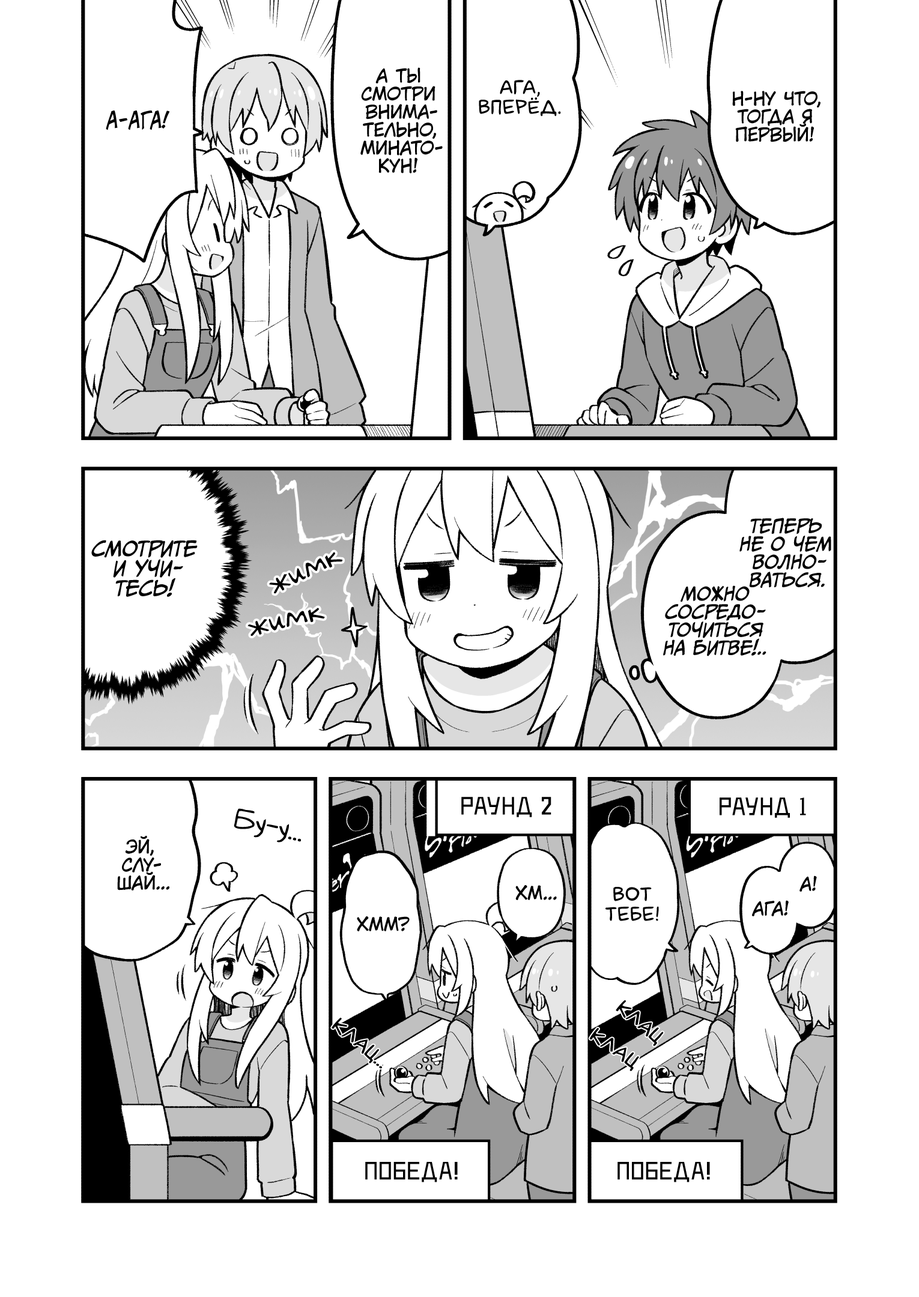
<style>
.page{position:relative;width:919px;height:1297px;background:#ffffff}
.page>*{position:absolute;margin:0}
.t1{font:18px "KuraiVoice2";color:#000000;text-transform:uppercase}
.t2{font:19.8px "laCartoonerie";color:#000000;text-transform:uppercase}
.t3{font:21.6px "v_CCJeffCampbell";color:#000000;text-transform:uppercase}
.t4{font:18px "CCMeanwhile";color:#000000;text-transform:uppercase;font-style:italic}
.t5{font:19.8px "CCMeanwhile";color:#000000;text-transform:uppercase;font-style:italic}
.t6{font:28.8px "v_Augie";color:#000000}
.t7{font:25.2px "DeadMetroC";color:#000000;text-transform:uppercase}
.t8{font:27px "v_Augie";color:#000000}
</style>
<div class="page">
<p class="t1" style="left:360px;top:67px;width:83px;height:107px;text-align:center">А ты<br>смотри<br>внима-<br>тельно,<br>Минато-<br>кун!</p>
<p class="t2" style="left:479px;top:80px;width:82px;height:37px;text-align:center">Ага,<br>вперёд.</p>
<p class="t1" style="left:732px;top:91px;width:89px;height:51px;text-align:center">Н-ну что,<br>тогда я<br>первый!</p>
<p class="t3" style="left:106px;top:111px;width:64px;height:19px">А-ага!</p>
<p class="t4" style="left:739px;top:518px;width:92px;height:70px;text-align:center">Теперь<br>не о чем<br>волно-<br>ваться.</p>
<p class="t5" style="left:91px;top:540px;width:107px;height:57px;text-align:center">Смотрите<br>и учи-<br>тесь!</p>
<p class="t6" style="left:269px;top:552px;width:73px;height:42px;rotate:-27deg">жимк</p>
<p class="t4" style="left:663px;top:586px;width:103px;height:71px;text-align:center">Можно<br>сосредо-<br>точиться<br>на битве!..</p>
<p class="t6" style="left:247px;top:608px;width:78px;height:28px;rotate:-15deg">жимк</p>
<p class="t7" style="left:461px;top:797px;width:90px;height:21px">Раунд 2</p>
<p class="t7" style="left:720px;top:798px;width:86px;height:20px">Раунд 1</p>
<p class="t8" style="left:234px;top:809px;width:67px;height:34px;rotate:12deg">Бу-у...</p>
<p class="t1" style="left:117px;top:836px;width:52px;height:55px;text-align:center">Эй,<br>слу-<br>шай...</p>
<p class="t1" style="left:800px;top:876px;width:17px;height:16px">А!</p>
<p class="t1" style="left:515px;top:885px;width:42px;height:15px">Хм...</p>
<p class="t2" style="left:605px;top:887px;width:54px;height:34px;text-align:center">Вот<br>тебе!</p>
<p class="t1" style="left:752px;top:900px;width:37px;height:17px">Ага!</p>
<p class="t1" style="left:357px;top:917px;width:53px;height:15px">Хмм?</p>
<p class="t7" style="left:365px;top:1162px;width:93px;height:21px">Победа!</p>
<p class="t7" style="left:618px;top:1162px;width:92px;height:21px">Победа!</p>
</div>
